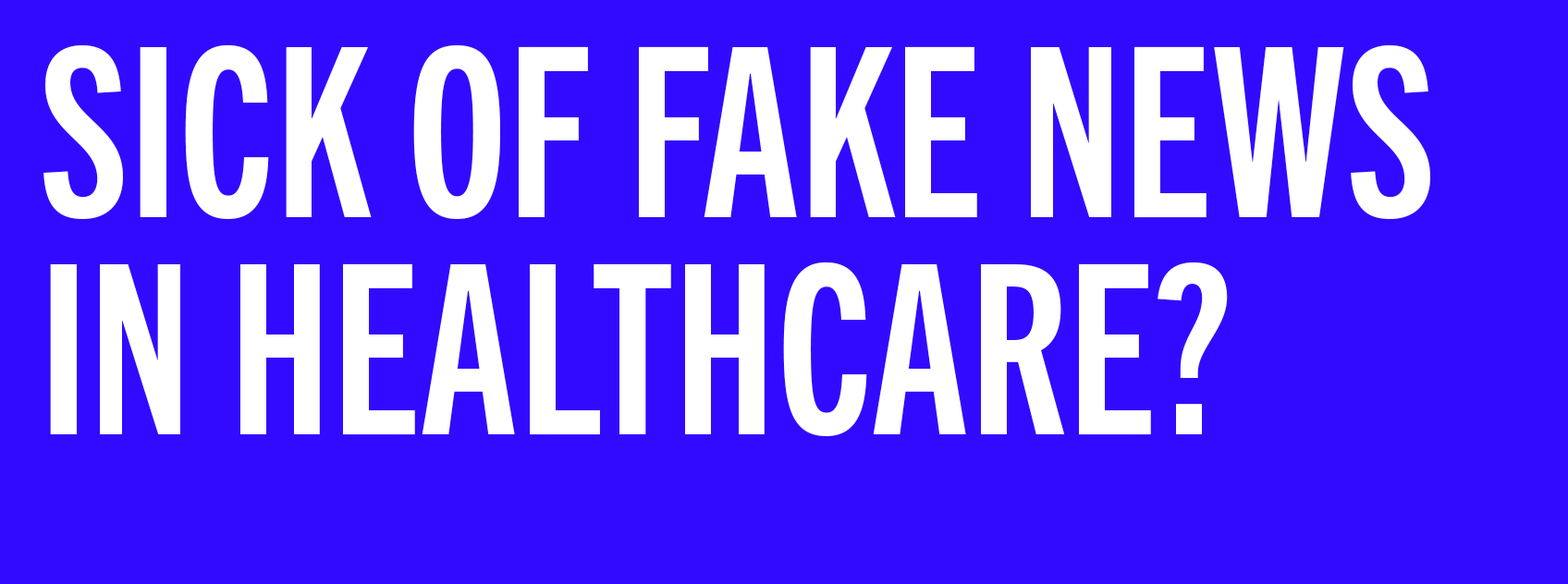
<style>
.page{position:relative;width:1568px;height:584px;background:#320aff}
.page>*{position:absolute;margin:0}
.t1{font:236.9px "TradeGothicNextLTPro-BdCm";letter-spacing:0.005em;color:#ffffff}
</style>
<div class="page">
<p class="t1" style="left:43px;top:44px;width:1387px;height:392px">SICK OF FAKE NEWS IN HEALTHCARE?</p>
</div>
